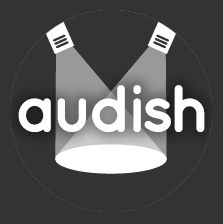
<style>
.page{position:relative;width:223px;height:224px;background:#333333}
.page>*{position:absolute;margin:0}
.t1{font:66.7px "Quicksand-Bold";letter-spacing:-0.075em;color:#ffffff}
</style>
<div class="page">
<p class="t1" style="left:18px;top:85px;width:187px;height:47px">audish</p>
</div>
